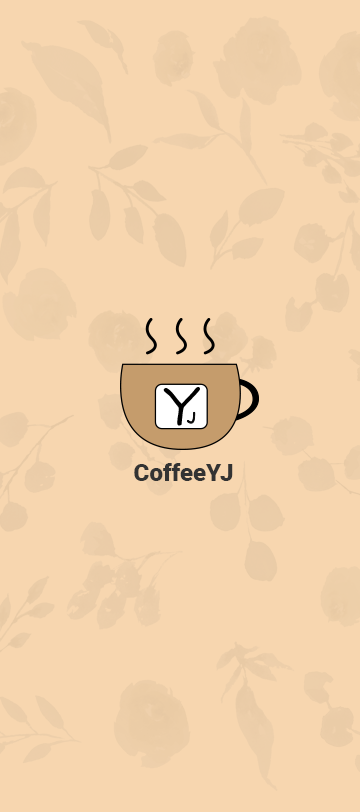
<style>
.page{position:relative;width:360px;height:812px;background:#f7d6af}
.page>*{position:absolute;margin:0}
.t1{font:24px "Roboto-Black";color:#333333}
</style>
<div class="page">
<p class="t1" style="left:134px;top:463px;width:99px;height:18px">CoffeeYJ</p>
</div>
